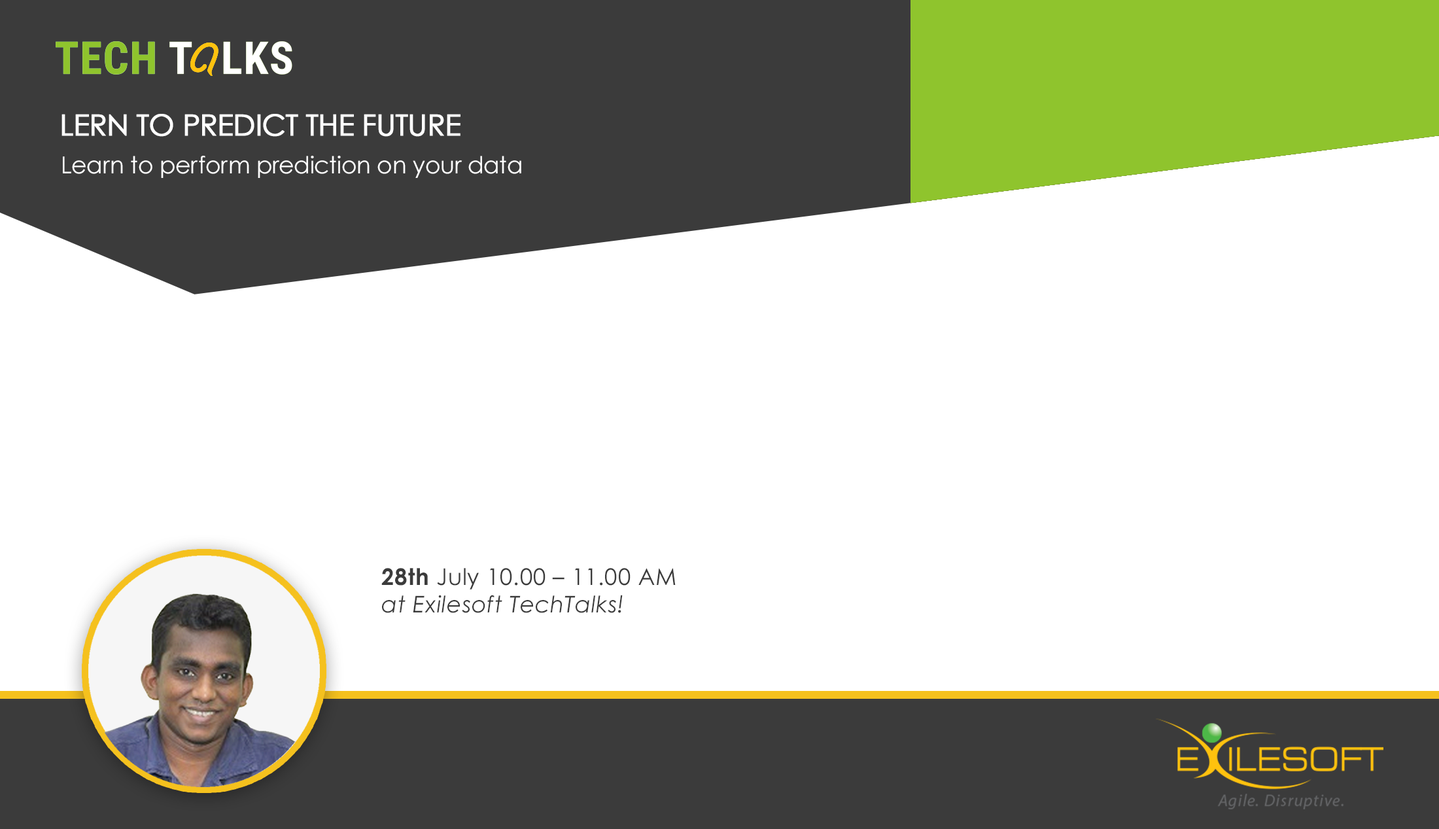
<style>
.page{position:relative;width:1439px;height:829px;background:#ffffff}
.page>*{position:absolute;margin:0}
.t1{font:29.4px "CenturyGothic";letter-spacing:-0.03em;color:#ffffff;text-transform:uppercase;font-weight:bold}
.t2{font:23.5px "CenturyGothic";letter-spacing:-0.01em;color:#ffffff}
.t3{font:22.9px "CenturyGothic-Italic";letter-spacing:0.02em;color:#3b3b3b}
.t4{font:22.9px "CenturyGothic-Bold";letter-spacing:0.02em;color:#3b3b3b}
.t5{font:22.9px "CenturyGothic";letter-spacing:0.02em;color:#3b3b3b}
</style>
<div class="page">
<p class="t1" style="left:61px;top:114px;width:399px;height:23px">Lern to Predict the Future</p>
<p class="t2" style="left:63px;top:156px;width:458px;height:22px">Learn to perform prediction on your data</p>
<p class="t3" style="left:381px;top:568px;width:295px;height:45px"><span class="t4">28th</span><span class="t5"> July 10.00 – 11.00 AM<br></span>at Exilesoft TechTalks!</p>
</div>
